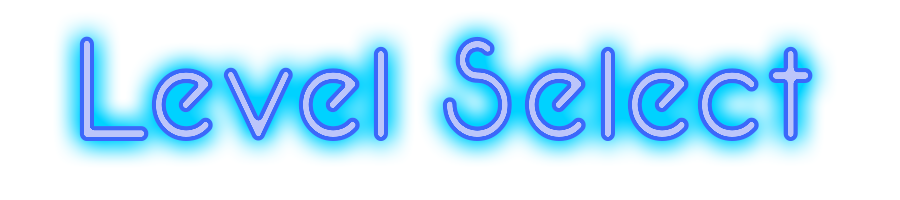
<style>
.page{position:relative;width:900px;height:200px;background:#ffffff}
.page>*{position:absolute;margin:0}
.t1{font:148.7px "Neon80s";scale:0.95 1}
</style>
<div class="page">
<p class="t1" style="left:79px;top:36px;width:734px;height:105px">Level Select</p>
</div>
